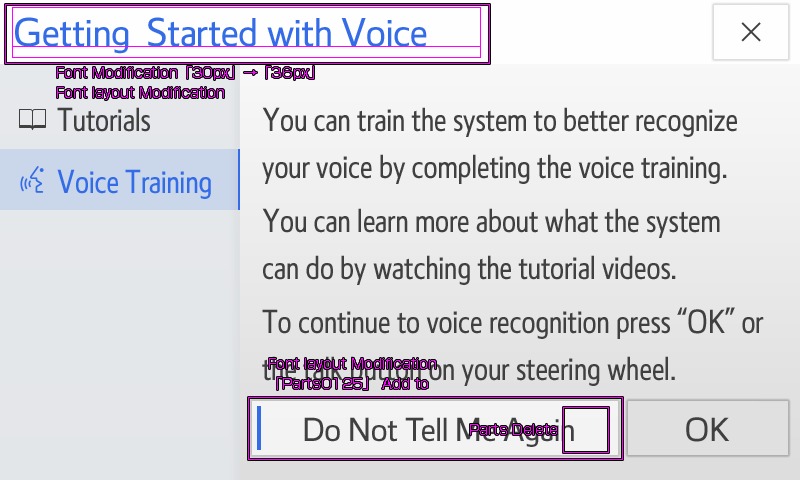
<style>
.page{position:relative;width:800px;height:480px}
.page>*{position:absolute;margin:0}
.t1{font:36px "Tfont1502_T1S";color:#336ce6}
.t2{font:14px/20px "ShinGoPro-Regular";color:#ff00ff}
.t3{font:30px "Tfont1502_T2S";color:#404041}
.t4{font:30px/47px "Tfont1502_T2S";color:#404040}
.t5{font:30px "Tfont1502_T2S";color:#336ce6}
.t6{font:30px "Tfont1502_T1S";color:#404041}
.t7{font:14px "ShinGoPro-Regular";color:#ff00ff}
</style>
<div class="page">
<p class="t1" style="left:15px;top:17px;width:412px;height:37px">Getting  Started with Voice</p>
<p class="t2" style="left:57px;top:66px;width:257px;height:34px">Font Modification「30px」→「36px」<br>Font layout Modification</p>
<p class="t3" style="left:57px;top:107px;width:93px;height:25px">Tutorials</p>
<p class="t4" style="left:262px;top:107px;width:475px;height:77px">You can train the system to better recognize <br>your voice by completing the voice training.</p>
<p class="t5" style="left:57px;top:169px;width:154px;height:30px">Voice Training</p>
<p class="t4" style="left:262px;top:208px;width:458px;height:77px">You can learn more about what the system<br>can do by watching the tutorial videos.</p>
<p class="t4" style="left:262px;top:307px;width:502px;height:79px">To continue to voice recognition press “OK” or <br>the talk button on your steering wheel.</p>
<p class="t2" style="left:269px;top:358px;width:167px;height:32px">Font layout Modification<br>「Parts0125」 Add to</p>
<p class="t6" style="left:304px;top:417px;width:270px;height:30px">Do Not Tell Me Again</p>
<p class="t7" style="left:470px;top:424px;width:87px;height:11px">Parts Delete</p>
<p class="t6" style="left:686px;top:417px;width:44px;height:25px">OK</p>
</div>
